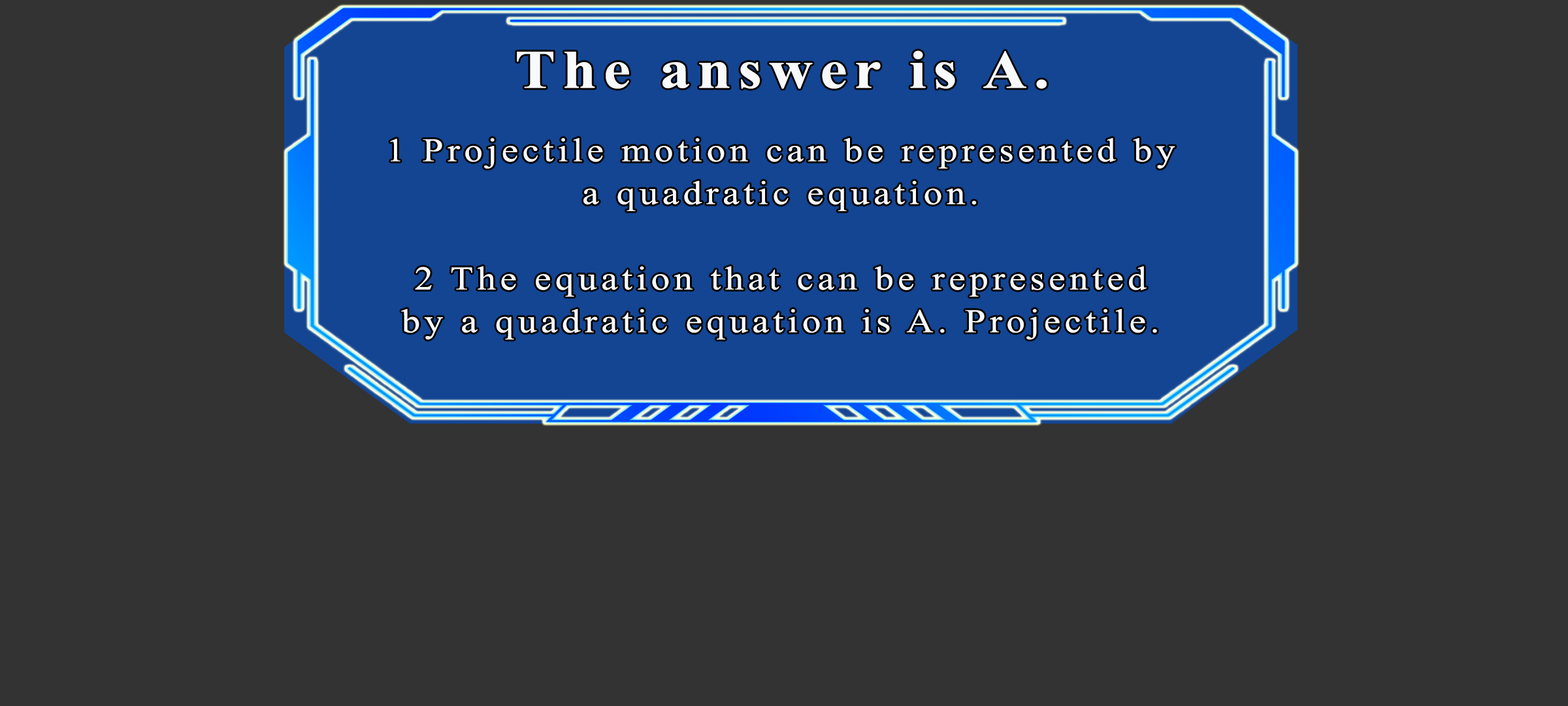
<style>
.page{position:relative;width:1568px;height:706px;background:#333333}
.page>*{position:absolute;margin:0}
.t1{font:54.4px "TimesNewRomanPS-BoldMT";letter-spacing:0.115em;color:#f7f9fb;scale:1.12 1}
.t2{font:33.2px/42.7px "TimesNewRomanPSMT";letter-spacing:0.115em;color:#f7f9fb;scale:1.12 1}
</style>
<div class="page">
<p class="t1" style="left:517px;top:50px;width:530px;height:39px">The answer is A.</p>
<p class="t2" style="left:390px;top:138px;width:785px;height:202px;text-align:center">1 Projectile motion can be represented by<br>a quadratic equation.<br><br>2 The equation that can be represented<br>by a quadratic equation is A. Projectile.</p>
</div>
